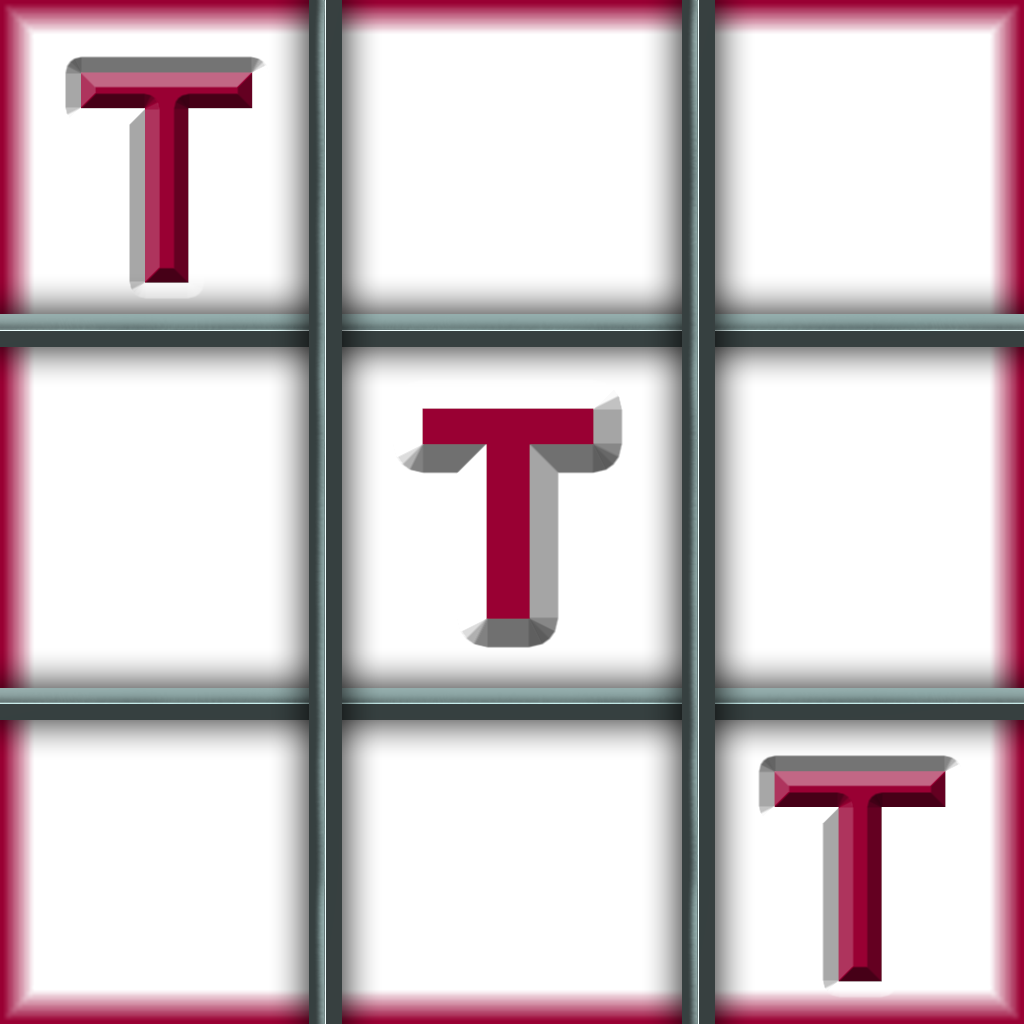
<style>
.page{position:relative;width:1024px;height:1024px;background:#ffffff}
.page>*{position:absolute;margin:0}
.t1{font:293.3px "ArialNarrow-Bold";scale:1.25 1}
.t2{font:293.3px "ArialNarrow-Bold";color:#990033;scale:1.25 1}
</style>
<div class="page">
<p class="t1" style="left:81px;top:72px;width:172px;height:211px">T</p>
<p class="t2" style="left:422px;top:408px;width:172px;height:211px">T</p>
<p class="t1" style="left:774px;top:771px;width:172px;height:211px">T</p>
</div>
